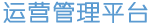
<style>
.page{position:relative;width:150px;height:24px;background:#ffffff}
.page>*{position:absolute;margin:0}
.t1{font:24px "ZHSRXT--GBK1-0";color:#5b9bd1;font-weight:bold}
</style>
<div class="page">
<p class="t1" style="left:3px;top:1px;width:145px;height:22px">运营管理平台</p>
</div>
